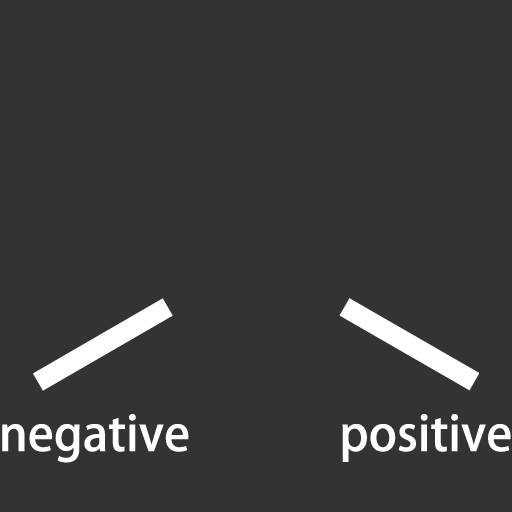
<style>
.page{position:relative;width:512px;height:512px;background:#333333}
.page>*{position:absolute;margin:0}
.t1{font:48px "AdobeHeitiStd-Regular";color:#ffffff}
</style>
<div class="page">
<p class="t1" style="left:2px;top:414px;width:187px;height:49px">negative</p>
<p class="t1" style="left:342px;top:414px;width:169px;height:48px">positive</p>
</div>
